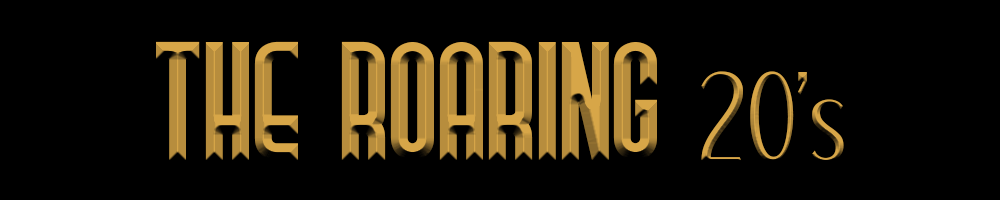
<style>
.page{position:relative;width:1000px;height:200px;background:#000000}
.page>*{position:absolute;margin:0}
.t1{font:125px "ProsaGT-Demo"}
.t2{font:125px "Jika"}
</style>
<div class="page">
<p class="t1" style="left:156px;top:41px;width:688px;height:120px">The Roaring <span class="t2">20’s</span></p>
</div>
